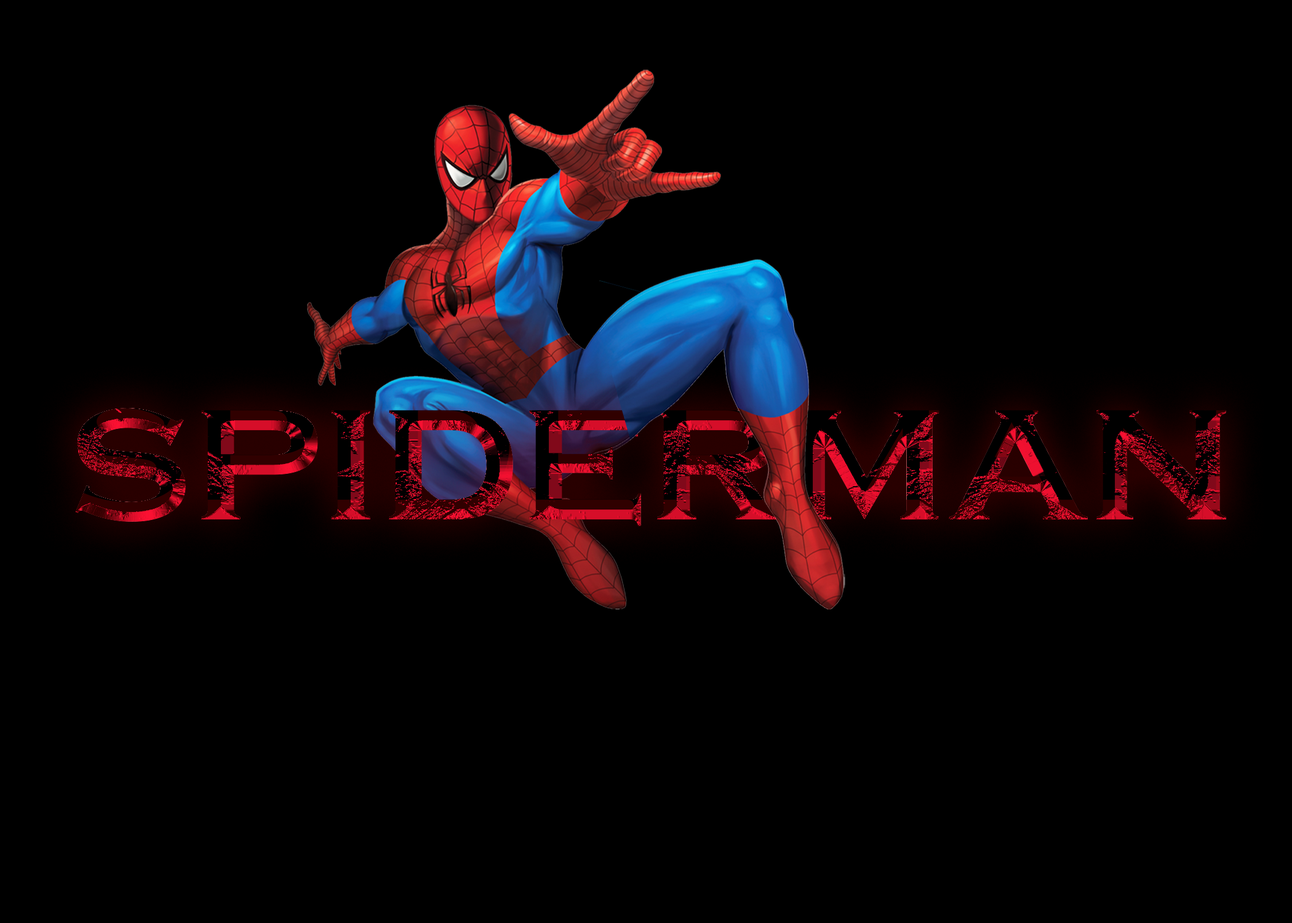
<style>
.page{position:relative;width:1292px;height:923px;background:#000000}
.page>*{position:absolute;margin:0}
.t1{font:199.5px "CopperplateGothic-Bold"}
</style>
<div class="page">
<p class="t1" style="left:75px;top:404px;width:1151px;height:122px">spiderman</p>
</div>
